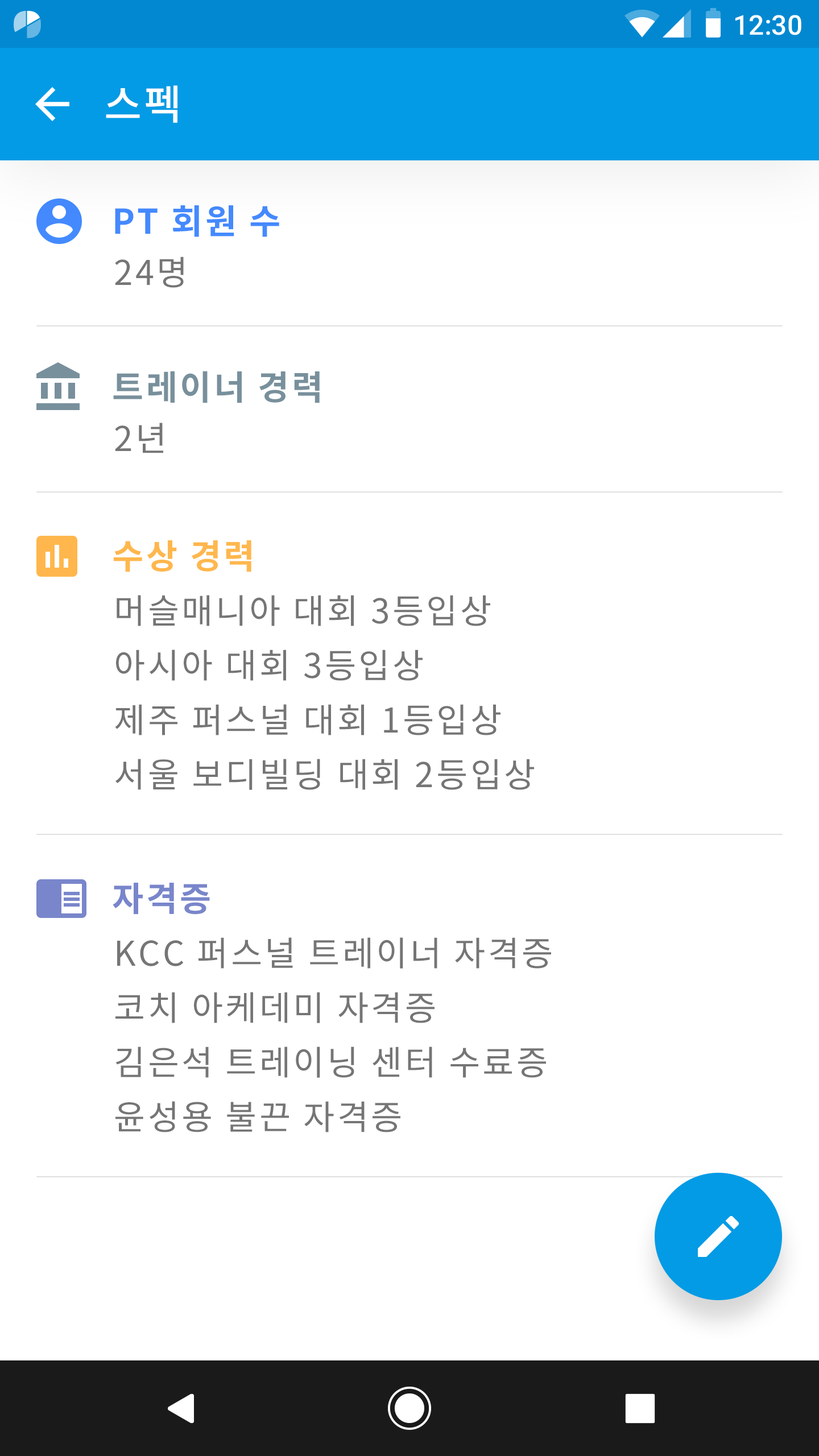
<style>
.page{position:relative;width:819px;height:1456px;background:#ffffff}
.page>*{position:absolute;margin:0}
.t1{font:27.3px "Roboto-Medium";color:#ffffff}
.t2{font:40.9px "NotoSansCJKkr-Medium";letter-spacing:0.05em;color:#ffffff}
.t3{font:34.1px "NotoSansCJKkr-Bold";letter-spacing:0.072em;color:#448aff}
.t4{font:34.1px "NotoSansCJKkr-Regular";letter-spacing:0.072em;color:#757575}
.t5{font:34.1px "NotoSansCJKkr-Bold";letter-spacing:0.072em;color:#78909c}
.t6{font:34.1px "NotoSansCJKkr-Bold";letter-spacing:0.072em;color:#ffb74d}
.t7{font:34.1px/54.6px "NotoSansCJKkr-Regular";letter-spacing:0.072em;color:#757575}
.t8{font:34.1px "NotoSansCJKkr-Bold";letter-spacing:0.072em;color:#7986cb}
</style>
<div class="page">
<p class="t1" style="left:735px;top:15px;width:66px;height:20px">12:30</p>
<p class="t2" style="left:106px;top:85px;width:71px;height:38px">스펙</p>
<p class="t3" style="left:115px;top:205px;width:164px;height:32px">PT 회원 수</p>
<p class="t4" style="left:115px;top:257px;width:69px;height:31px">24명</p>
<p class="t5" style="left:113px;top:371px;width:207px;height:32px">트레이너 경력</p>
<p class="t4" style="left:115px;top:423px;width:48px;height:30px">2년</p>
<p class="t6" style="left:113px;top:540px;width:138px;height:32px">수상 경력</p>
<p class="t7" style="left:115px;top:595px;width:419px;height:195px">머슬매니아대회3등입상 <br>아시아대회3등입상 <br>제주퍼스널대회1등입상 <br>서울보디빌딩대회2등입상</p>
<p class="t8" style="left:113px;top:883px;width:97px;height:32px">자격증</p>
<p class="t7" style="left:115px;top:937px;width:436px;height:195px">KCC퍼스널트레이너자격증 <br>코치아케데미자격증 <br>김은석트레이닝센터수료증<br>윤성용불끈자격증</p>
</div>
